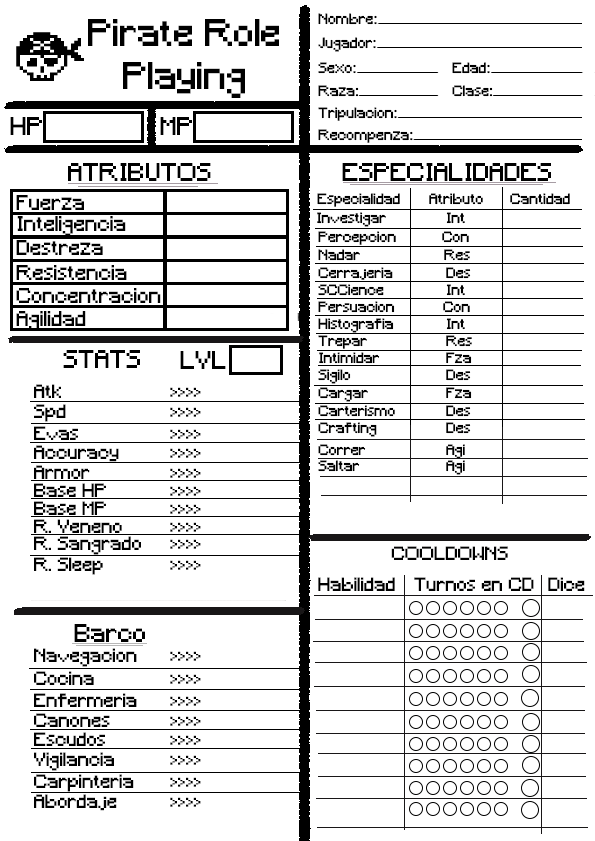
<style>
.page{position:relative;width:595px;height:841px;background:#ffffff}
.page>*{position:absolute;margin:0}
.t1{font:14px "Minecraft";color:#000000}
.t2{font:36px "Minecraft";color:#000000}
.t3{font:24px "Minecraft";color:#000000}
.t4{font:20px "Minecraft";color:#000000}
.t5{font:18px "Minecraft";color:#000000}
</style>
<div class="page">
<p class="t1" style="left:318px;top:13px;width:59px;height:12px">Nombre:</p>
<p class="t2" style="left:88px;top:19px;width:191px;height:79px;text-align:center">Pirate Role <br>Playing</p>
<p class="t1" style="left:318px;top:37px;width:58px;height:15px">Jugador:</p>
<p class="t1" style="left:318px;top:62px;width:38px;height:12px">Sexo:</p>
<p class="t1" style="left:452px;top:62px;width:38px;height:12px">Edad:</p>
<p class="t1" style="left:318px;top:85px;width:41px;height:12px">Raza:</p>
<p class="t1" style="left:452px;top:85px;width:41px;height:12px">Clase:</p>
<p class="t1" style="left:318px;top:107px;width:79px;height:14px">Tripulacion:</p>
<p class="t3" style="left:10px;top:117px;width:32px;height:18px">HP</p>
<p class="t3" style="left:160px;top:117px;width:32px;height:18px">MP</p>
<p class="t1" style="left:318px;top:129px;width:95px;height:14px">Recompenza:</p>
<p class="t3" style="left:68px;top:163px;width:143px;height:18px">ATRIBUTOS</p>
<p class="t3" style="left:342px;top:163px;width:209px;height:18px">ESPECIALIDADES</p>
<p class="t4" style="left:16px;top:195px;width:68px;height:15px">Fuerza</p>
<p class="t1" style="left:317px;top:193px;width:83px;height:14px">Especialidad</p>
<p class="t1" style="left:429px;top:193px;width:54px;height:12px">Atributo</p>
<p class="t1" style="left:510px;top:193px;width:60px;height:12px">Cantidad</p>
<p class="t4" style="left:17px;top:216px;width:109px;height:20px">Inteligencia</p>
<p class="t1" style="left:317px;top:212px;width:69px;height:15px">Investigar</p>
<p class="t1" style="left:446px;top:212px;width:19px;height:12px">Int</p>
<p class="t1" style="left:318px;top:231px;width:78px;height:14px">Percepcion</p>
<p class="t1" style="left:442px;top:231px;width:27px;height:12px">Con</p>
<p class="t4" style="left:16px;top:240px;width:87px;height:15px">Destreza</p>
<p class="t1" style="left:318px;top:249px;width:42px;height:12px">Nadar</p>
<p class="t1" style="left:444px;top:249px;width:26px;height:12px">Res</p>
<p class="t4" style="left:16px;top:265px;width:111px;height:15px">Resistencia</p>
<p class="t1" style="left:318px;top:267px;width:75px;height:13px">Cerrajeria</p>
<p class="t1" style="left:446px;top:267px;width:25px;height:12px">Des</p>
<p class="t4" style="left:16px;top:288px;width:145px;height:15px">Concentracion</p>
<p class="t1" style="left:318px;top:284px;width:66px;height:12px">SCCience</p>
<p class="t1" style="left:446px;top:284px;width:19px;height:12px">Int</p>
<p class="t1" style="left:318px;top:301px;width:77px;height:12px">Persuacion</p>
<p class="t1" style="left:443px;top:301px;width:27px;height:12px">Con</p>
<p class="t4" style="left:16px;top:311px;width:70px;height:20px">Agilidad</p>
<p class="t1" style="left:318px;top:318px;width:76px;height:15px">Histografia</p>
<p class="t1" style="left:446px;top:318px;width:19px;height:12px">Int</p>
<p class="t1" style="left:318px;top:335px;width:49px;height:14px">Trepar</p>
<p class="t1" style="left:446px;top:335px;width:26px;height:12px">Res</p>
<p class="t3" style="left:63px;top:350px;width:77px;height:18px">STATS</p>
<p class="t3" style="left:180px;top:351px;width:46px;height:18px">LVL</p>
<p class="t1" style="left:319px;top:352px;width:61px;height:12px">Intimidar</p>
<p class="t1" style="left:446px;top:352px;width:26px;height:12px">Fza</p>
<p class="t1" style="left:318px;top:369px;width:33px;height:15px">Sigilo</p>
<p class="t1" style="left:446px;top:369px;width:25px;height:12px">Des</p>
<p class="t5" style="left:34px;top:384px;width:27px;height:14px">Atk</p>
<p class="t5" style="left:170px;top:387px;width:31px;height:10px">&gt;&gt;&gt;&gt;</p>
<p class="t1" style="left:318px;top:387px;width:50px;height:15px">Cargar</p>
<p class="t1" style="left:446px;top:387px;width:26px;height:12px">Fza</p>
<p class="t5" style="left:34px;top:404px;width:32px;height:18px">Spd</p>
<p class="t5" style="left:170px;top:407px;width:31px;height:10px">&gt;&gt;&gt;&gt;</p>
<p class="t1" style="left:318px;top:405px;width:77px;height:12px">Carterismo</p>
<p class="t1" style="left:446px;top:405px;width:25px;height:12px">Des</p>
<p class="t1" style="left:318px;top:422px;width:59px;height:15px">Crafting</p>
<p class="t1" style="left:446px;top:422px;width:25px;height:12px">Des</p>
<p class="t5" style="left:34px;top:426px;width:44px;height:14px">Evas</p>
<p class="t5" style="left:170px;top:429px;width:31px;height:10px">&gt;&gt;&gt;&gt;</p>
<p class="t5" style="left:34px;top:445px;width:85px;height:17px">Accuracy</p>
<p class="t5" style="left:170px;top:448px;width:31px;height:10px">&gt;&gt;&gt;&gt;</p>
<p class="t1" style="left:318px;top:444px;width:48px;height:12px">Correr</p>
<p class="t1" style="left:446px;top:444px;width:19px;height:15px">Agi</p>
<p class="t1" style="left:318px;top:460px;width:42px;height:12px">Saltar</p>
<p class="t1" style="left:446px;top:460px;width:19px;height:15px">Agi</p>
<p class="t5" style="left:34px;top:465px;width:56px;height:14px">Armor</p>
<p class="t5" style="left:170px;top:468px;width:31px;height:10px">&gt;&gt;&gt;&gt;</p>
<p class="t5" style="left:34px;top:483px;width:72px;height:14px">Base HP</p>
<p class="t5" style="left:170px;top:486px;width:31px;height:10px">&gt;&gt;&gt;&gt;</p>
<p class="t5" style="left:34px;top:501px;width:72px;height:14px">Base MP</p>
<p class="t5" style="left:170px;top:504px;width:31px;height:10px">&gt;&gt;&gt;&gt;</p>
<p class="t5" style="left:34px;top:519px;width:88px;height:14px">R. Veneno</p>
<p class="t5" style="left:170px;top:522px;width:31px;height:10px">&gt;&gt;&gt;&gt;</p>
<p class="t5" style="left:34px;top:536px;width:107px;height:19px">R. Sangrado</p>
<p class="t5" style="left:170px;top:539px;width:31px;height:10px">&gt;&gt;&gt;&gt;</p>
<p class="t5" style="left:34px;top:557px;width:69px;height:18px">R. Sleep</p>
<p class="t5" style="left:391px;top:546px;width:117px;height:14px">COOLDOWNS</p>
<p class="t5" style="left:170px;top:560px;width:31px;height:10px">&gt;&gt;&gt;&gt;</p>
<p class="t5" style="left:318px;top:577px;width:77px;height:14px">Habilidad</p>
<p class="t5" style="left:414px;top:577px;width:120px;height:14px">Turnos en CD</p>
<p class="t5" style="left:548px;top:577px;width:37px;height:14px">Dice</p>
<p class="t3" style="left:74px;top:624px;width:71px;height:18px">Barco</p>
<p class="t5" style="left:34px;top:648px;width:103px;height:19px">Navegacion</p>
<p class="t5" style="left:170px;top:651px;width:31px;height:10px">&gt;&gt;&gt;&gt;</p>
<p class="t5" style="left:34px;top:671px;width:60px;height:14px">Cocina</p>
<p class="t5" style="left:170px;top:674px;width:31px;height:10px">&gt;&gt;&gt;&gt;</p>
<p class="t5" style="left:34px;top:693px;width:103px;height:14px">Enfermeria</p>
<p class="t5" style="left:170px;top:696px;width:31px;height:10px">&gt;&gt;&gt;&gt;</p>
<p class="t5" style="left:34px;top:713px;width:76px;height:14px">Canones</p>
<p class="t5" style="left:170px;top:716px;width:31px;height:10px">&gt;&gt;&gt;&gt;</p>
<p class="t5" style="left:34px;top:732px;width:71px;height:14px">Escudos</p>
<p class="t5" style="left:170px;top:735px;width:31px;height:10px">&gt;&gt;&gt;&gt;</p>
<p class="t5" style="left:34px;top:752px;width:80px;height:19px">Vigilancia</p>
<p class="t5" style="left:170px;top:755px;width:31px;height:10px">&gt;&gt;&gt;&gt;</p>
<p class="t5" style="left:34px;top:774px;width:100px;height:18px">Carpinteria</p>
<p class="t5" style="left:170px;top:777px;width:31px;height:10px">&gt;&gt;&gt;&gt;</p>
<p class="t5" style="left:34px;top:794px;width:83px;height:17px">Abordaje</p>
<p class="t5" style="left:170px;top:797px;width:31px;height:10px">&gt;&gt;&gt;&gt;</p>
</div>
